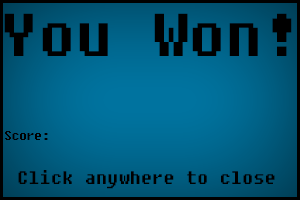
<style>
.page{position:relative;width:300px;height:200px}
.page>*{position:absolute;margin:0}
.t1{font:60px "Fixedsys";color:#000000}
.t2{font:12px "Fixedsys";color:#000000}
.t3{font:18px "Fixedsys";color:#000000}
</style>
<div class="page">
<p class="t1" style="left:4px;top:13px;width:288px;height:43px">You Won!</p>
<p class="t2" style="left:5px;top:131px;width:43px;height:9px">Score:</p>
<p class="t3" style="left:18px;top:170px;width:257px;height:19px">Click anywhere to close</p>
</div>
